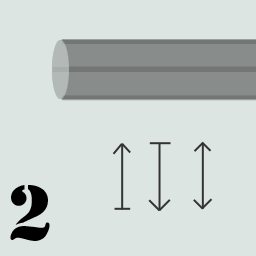
<style>
.page{position:relative;width:256px;height:256px;background:#dde5e3}
.page>*{position:absolute;margin:0}
.t1{font:72px "StencilStd";color:#000000}
</style>
<div class="page">
<p class="t1" style="left:10px;top:185px;width:40px;height:56px">2</p>
</div>
